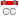
<style>
.page{position:relative;width:19px;height:19px;background:#ffffff}
.page>*{position:absolute;margin:0}
.t1{font:9.5px "Helvetica"}
</style>
<div class="page">
<p class="t1" style="left:3px;top:8px;width:13px;height:7px">CC</p>
</div>
